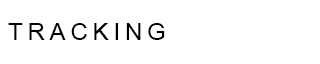
<style>
.page{position:relative;width:320px;height:64px;background:#ffffff}
.page>*{position:absolute;margin:0}
.t1{font:24px "ArialMT";letter-spacing:0.2em;color:#000000}
</style>
<div class="page">
<p class="t1" style="left:8px;top:23px;width:157px;height:17px">TRACKING</p>
</div>
